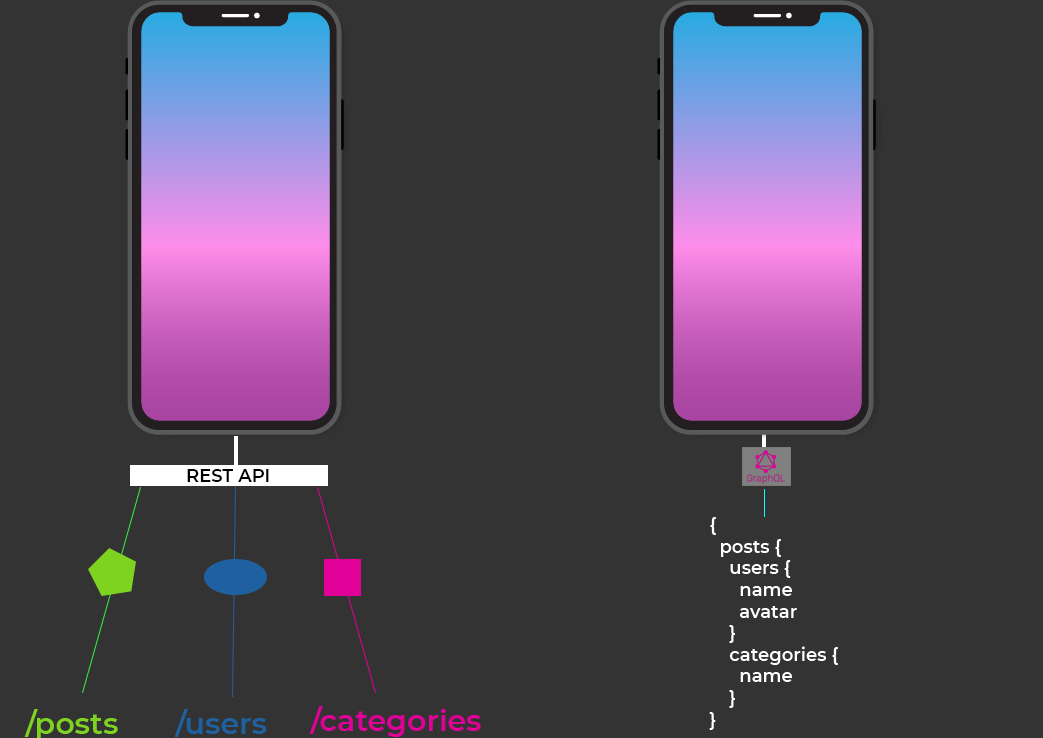
<style>
.page{position:relative;width:1043px;height:738px;background:#333333}
.page>*{position:absolute;margin:0}
.t1{font:18px "Montserrat-SemiBold";color:#000000}
.t2{font:18px "Montserrat-SemiBold";color:#fffffe}
.t3{font:30px "Montserrat-SemiBold";color:#7ed321}
.t4{font:30px "Montserrat-SemiBold";color:#1f61a0}
.t5{font:30px "Montserrat-SemiBold";color:#e10098}
</style>
<div class="page">
<p class="t1" style="left:187px;top:469px;width:82px;height:13px">REST API</p>
<p class="t2" style="left:709px;top:517px;width:129px;height:213px">{<br>  posts {<br>    users {<br>      name<br>      avatar<br>    }<br>    categories {<br>      name <br>    }<br>}</p>
<p class="t3" style="left:24px;top:709px;width:94px;height:31px">/posts</p>
<p class="t4" style="left:174px;top:709px;width:93px;height:28px">/users</p>
<p class="t5" style="left:309px;top:706px;width:172px;height:31px">/categories</p>
</div>
